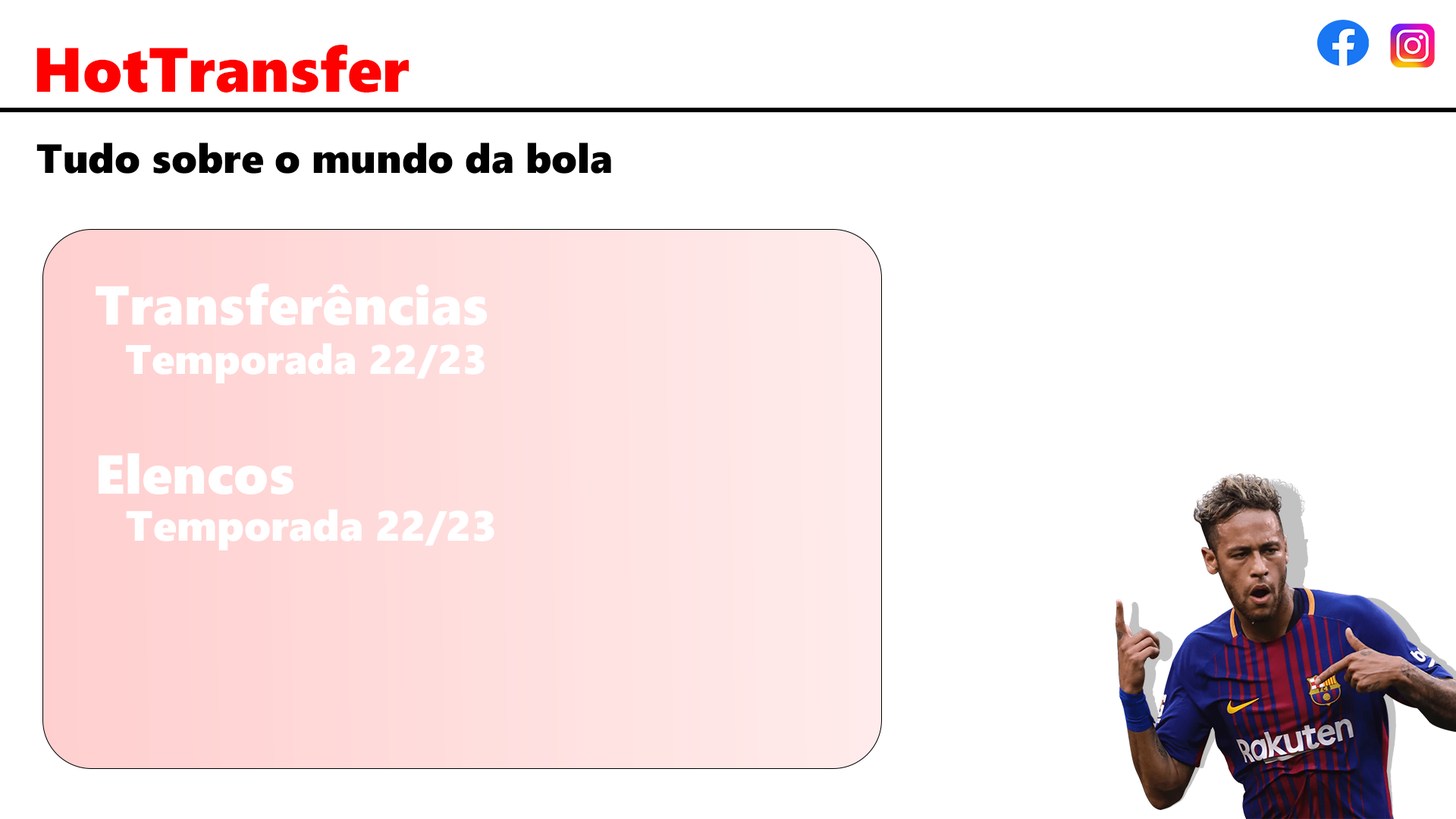
<style>
.page{position:relative;width:1456px;height:819px;background:#ffffff}
.page>*{position:absolute;margin:0}
.t1{font:62.6px "SegoeUIBlack";color:#ff0000}
.t2{font:40.7px "SegoeUIBlack";color:#000000}
.t3{font:54.6px "SegoeUIBlack";color:#ffffff}
.t4{font:41.2px "SegoeUIBlack";color:#ffffff}
.t5{font:42.2px "SegoeUIBlack";color:#ffffff}
</style>
<div class="page">
<p class="t1" style="left:36px;top:45px;width:373px;height:48px">HotTransfer</p>
<p class="t2" style="left:36px;top:143px;width:575px;height:31px">Tudo sobre o mundo da bola</p>
<p class="t3" style="left:96px;top:283px;width:391px;height:42px">Transferências</p>
<p class="t4" style="left:126px;top:343px;width:359px;height:41px">Temporada 22/23</p>
<p class="t3" style="left:99px;top:453px;width:194px;height:41px">Elencos</p>
<p class="t5" style="left:126px;top:509px;width:368px;height:42px">Temporada 22/23</p>
</div>
